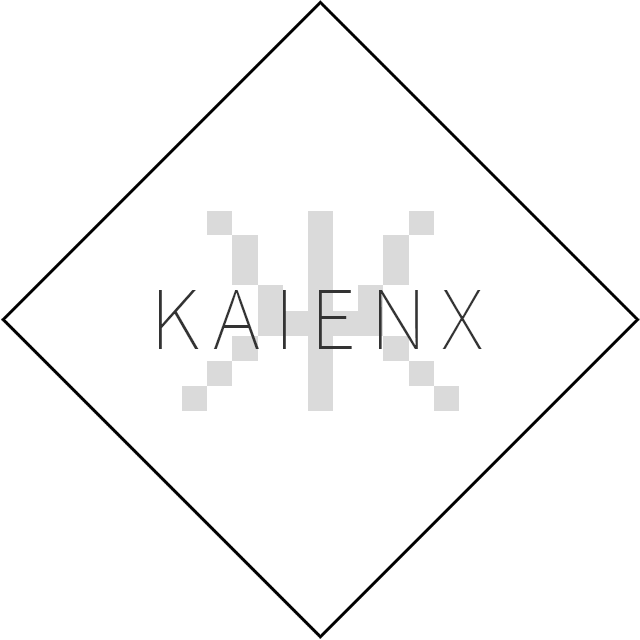
<style>
.page{position:relative;width:640px;height:640px;background:#ffffff}
.page>*{position:absolute;margin:0}
.t1{font:90px "SourceSansPro-ExtraLight";letter-spacing:0.16em;color:#333333}
</style>
<div class="page">
<p class="t1" style="left:159px;top:290px;width:323px;height:59px">KAIENX</p>
</div>
